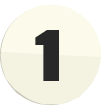
<style>
.page{position:relative;width:101px;height:109px;background:#f4f3e1}
.page>*{position:absolute;margin:0}
.t1{font:72px "MovaviGrotesqueBlack";color:#282828}
</style>
<div class="page">
<p class="t1" style="left:35px;top:30px;width:24px;height:51px">1</p>
</div>
